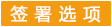
<style>
.page{position:relative;width:112px;height:27px;background:#f39c12}
.page>*{position:absolute;margin:0}
.t1{font:17px "MicrosoftYaHei";letter-spacing:0.4em;color:#ffffff;font-weight:bold}
</style>
<div class="page">
<p class="t1" style="left:10px;top:5px;width:91px;height:18px">签署选项</p>
</div>
